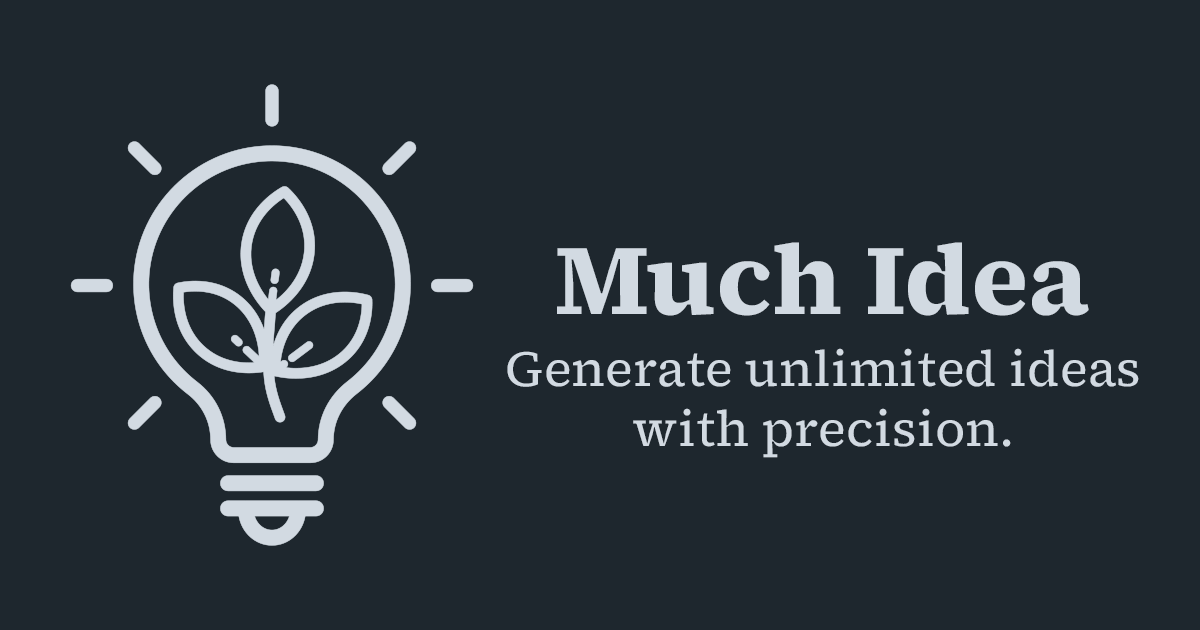
<style>
.page{position:relative;width:1200px;height:630px;background:#1e272e}
.page>*{position:absolute;margin:0}
.t1{font:100px "SourceSerif4Roman-CaptionBold";color:#d2dae2}
.t2{font:50px "SourceSerif4Roman-Caption";color:#d2dae2}
</style>
<div class="page">
<p class="t1" style="left:557px;top:242px;width:532px;height:74px">Much Idea</p>
<p class="t2" style="left:507px;top:348px;width:632px;height:110px;text-align:center">Generate unlimited ideas<br>with precision.</p>
</div>
